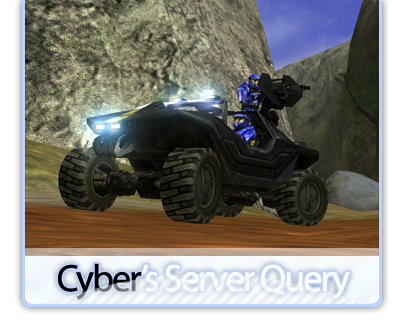
<style>
.page{position:relative;width:400px;height:320px}
.page>*{position:absolute;margin:0}
.t1{font:38px "MyriadPro-Regular";letter-spacing:-0.075em;color:#ffffff;font-weight:bold}
.t2{font:38px "MyriadPro-Regular";letter-spacing:-0.075em;color:#010000;font-weight:bold}
</style>
<div class="page">
<p class="t1" style="left:58px;top:263px;width:292px;height:37px"><span class="t2">Cyber</span>’s Server Query</p>
</div>
